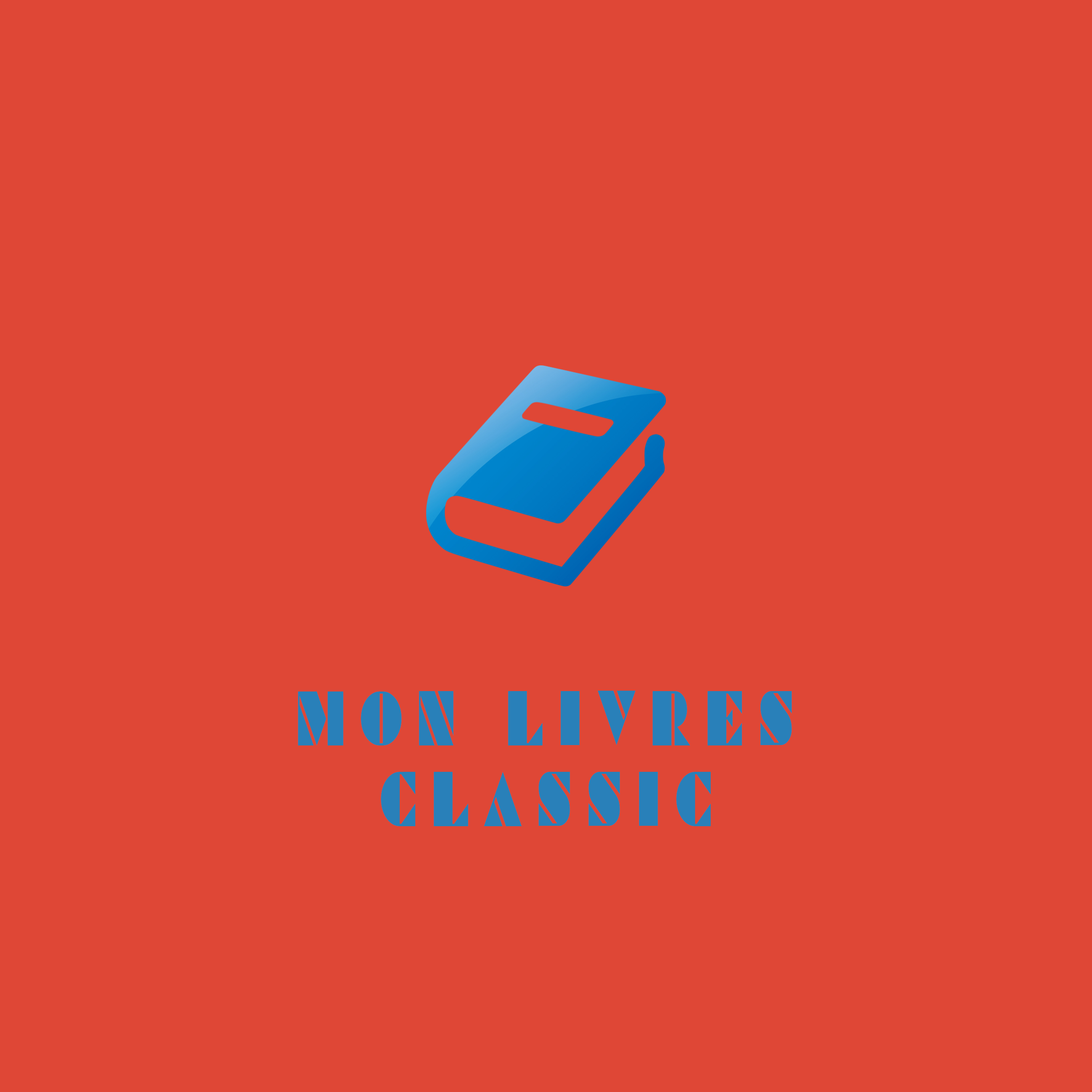
<style>
.page{position:relative;width:1092px;height:1092px;background:#df4736}
.page>*{position:absolute;margin:0}
.t1{font:77.9px "Commanders";letter-spacing:0.25em;color:#2980b9;text-transform:uppercase;scale:0.69 1}
</style>
<div class="page">
<p class="t1" style="left:298px;top:691px;width:494px;height:54px">mon Livres</p>
<p class="t1" style="left:381px;top:772px;width:330px;height:54px">classic</p>
</div>
